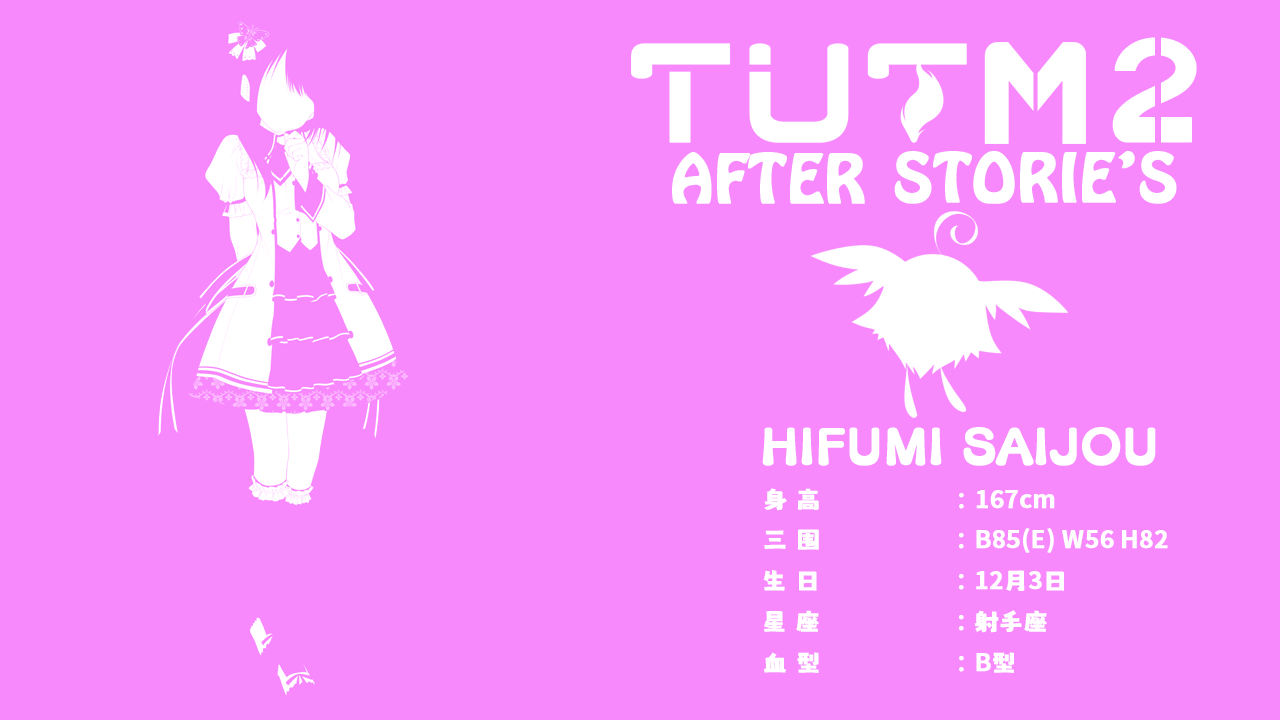
<style>
.page{position:relative;width:1280px;height:720px;background:#f889fd}
.page>*{position:absolute;margin:0}
.t1{font:24px "MaokenAssortedSans";color:#ffffff;font-weight:bold}
.t2{font:24px "AdobeHeitiStd-Regular";color:#ffffff;font-weight:bold}
.t3{font:24px "SourceHanSansSC-Bold";color:#ffffff;font-weight:bold}
</style>
<div class="page">
<p class="t1" style="left:764px;top:488px;width:200px;height:23px">身 高               <span class="t2">：</span></p>
<p class="t3" style="left:976px;top:490px;width:79px;height:19px">167cm</p>
<p class="t1" style="left:764px;top:529px;width:200px;height:21px">三 围               <span class="t2">：</span></p>
<p class="t3" style="left:976px;top:528px;width:192px;height:25px">B85(E) W56 H82</p>
<p class="t1" style="left:763px;top:570px;width:201px;height:21px">生 日               <span class="t2">：</span></p>
<p class="t3" style="left:976px;top:570px;width:88px;height:21px">12<span class="t1">月</span>3<span class="t1">日</span></p>
<p class="t1" style="left:764px;top:610px;width:200px;height:22px">星 座               <span class="t2">：</span></p>
<p class="t1" style="left:974px;top:610px;width:73px;height:23px">射手座</p>
<p class="t1" style="left:764px;top:652px;width:200px;height:21px">血 型               <span class="t2">：</span></p>
<p class="t3" style="left:976px;top:652px;width:38px;height:21px">B<span class="t1">型</span></p>
</div>
